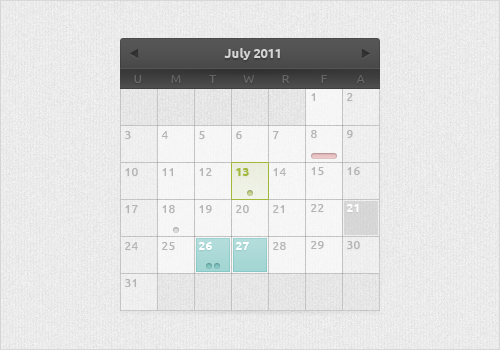
<style>
.page{position:relative;width:500px;height:350px}
.page>*{position:absolute;margin:0}
.t1{font:13px "Ubuntu-Bold";color:#d3d3d3}
.t2{font:12px "Ubuntu";color:#676767}
.t3{font:12px "Ubuntu";color:#646464}
.t4{font:12px "Ubuntu";color:#686868}
.t5{font:12px "Ubuntu";color:#696969}
.t6{font:12px/37px "Ubuntu";color:#b4b4b4}
.t7{font:12px/37px "Ubuntu-Bold";color:#ffffff}
.t8{font:12px/37px "Ubuntu-Bold";color:#a1b83a}
</style>
<div class="page">
<p class="t1" style="left:224px;top:48px;width:56px;height:12px">July 2011</p>
<p class="t2" style="left:134px;top:75px;width:8px;height:8px">U</p>
<p class="t2" style="left:171px;top:75px;width:10px;height:8px">M</p>
<p class="t3" style="left:209px;top:75px;width:7px;height:8px">T</p>
<p class="t4" style="left:243px;top:75px;width:12px;height:8px">W</p>
<p class="t2" style="left:282px;top:75px;width:8px;height:8px">R</p>
<p class="t2" style="left:321px;top:75px;width:6px;height:8px">F</p>
<p class="t5" style="left:356px;top:75px;width:9px;height:8px">A</p>
<p class="t6" style="left:311px;top:93px;width:13px;height:156px">1<br>8<br>15<br>22<br>29</p>
<p class="t6" style="left:346px;top:93px;width:14px;height:156px">2<br>9<br>16<br><span class="t7">21<br></span>30</p>
<p class="t6" style="left:125px;top:131px;width:13px;height:156px">3<br>10<br>17<br>24<br>31</p>
<p class="t6" style="left:161px;top:131px;width:14px;height:119px">4<br>11<br>18<br>25</p>
<p class="t6" style="left:198px;top:131px;width:14px;height:119px">5<br>12<br>19<br><span class="t7">26</span></p>
<p class="t8" style="left:235px;top:131px;width:14px;height:119px"><span class="t6">6<br></span>13<br><span class="t6">20<br></span><span class="t7">27</span></p>
<p class="t6" style="left:273px;top:131px;width:13px;height:119px">7<br>14<br>21<br>28</p>
</div>
